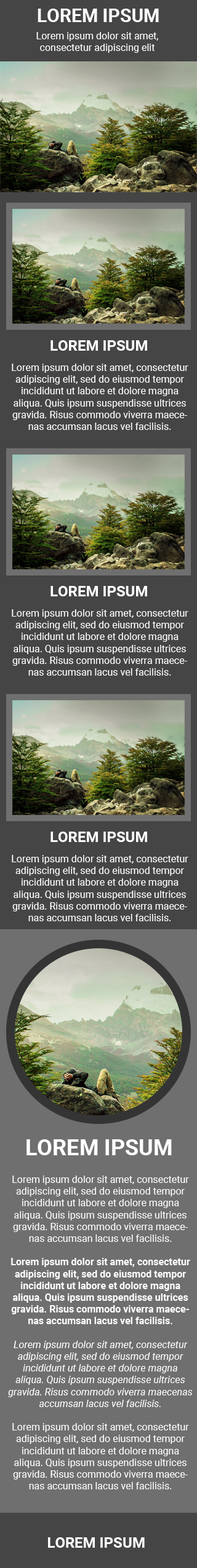
<style>
.page{position:relative;width:197px;height:1568px}
.page>*{position:absolute;margin:0}
.t1{font:18.4px "Roboto-Bold";color:#fefefe}
.t2{font:9.8px "Roboto-Regular";color:#ffffff}
.t3{font:14.7px "Roboto-Bold";color:#ffffff}
.t4{font:22.1px "Roboto-Bold";color:#ffffff}
.t5{font:9.8px "Roboto-Bold";color:#ffffff}
.t6{font:9.8px "Roboto-Italic";color:#ffffff}
</style>
<div class="page">
<p class="t1" style="left:37px;top:9px;width:121px;height:13px">LOREM IPSUM</p>
<p class="t2" style="left:36px;top:32px;width:122px;height:21px;text-align:center">Lorem ipsum dolor sit amet,<br>consectetur adipiscing elit</p>
<p class="t3" style="left:50px;top:340px;width:97px;height:11px">LOREM IPSUM</p>
<p class="t2" style="left:12px;top:364px;width:176px;height:66px;text-align:center">Lorem ipsum dolor sit amet, consectetur adipiscing elit, sed do eiusmod tempor incididunt ut labore et dolore magna aliqua. Quis ipsum suspendisse ultrices gravida. Risus commodo viverra maecenas accumsan lacus vel facilisis.</p>
<p class="t3" style="left:50px;top:586px;width:97px;height:10px">LOREM IPSUM</p>
<p class="t2" style="left:12px;top:609px;width:176px;height:67px;text-align:center">Lorem ipsum dolor sit amet, consectetur adipiscing elit, sed do eiusmod tempor incididunt ut labore et dolore magna aliqua. Quis ipsum suspendisse ultrices gravida. Risus commodo viverra maecenas accumsan lacus vel facilisis.</p>
<p class="t3" style="left:50px;top:832px;width:97px;height:10px">LOREM IPSUM</p>
<p class="t2" style="left:12px;top:855px;width:176px;height:66px;text-align:center">Lorem ipsum dolor sit amet, consectetur adipiscing elit, sed do eiusmod tempor incididunt ut labore et dolore magna aliqua. Quis ipsum suspendisse ultrices gravida. Risus commodo viverra maecenas accumsan lacus vel facilisis.</p>
<p class="t4" style="left:26px;top:1139px;width:145px;height:16px">LOREM IPSUM</p>
<p class="t2" style="left:8px;top:1176px;width:184px;height:313px;text-align:center">Lorem ipsum dolor sit amet, consectetur adipiscing elit, sed do eiusmod tempor incididunt ut labore et dolore magna aliqua. Quis ipsum suspendisse ultrices gravida. Risus commodo viverra maecenas accumsan lacus vel facilisis. <br><br><span class="t5">Lorem ipsum dolor sit amet, consectetur adipiscing elit, sed do eiusmod tempor incididunt ut labore et dolore magna aliqua. Quis ipsum suspendisse ultrices gravida. Risus commodo viverra maecenas accumsan lacus vel facilisis. <br></span><br><span class="t6">Lorem ipsum dolor sit amet, consectetur adipiscing elit, sed do eiusmod tempor incididunt ut labore et dolore magna aliqua. Quis ipsum suspendisse ultrices gravida. Risus commodo viverra maecenas accumsan lacus vel facilisis. <br></span><br>Lorem ipsum dolor sit amet, consectetur adipiscing elit, sed do eiusmod tempor incididunt ut labore et dolore magna aliqua. Quis ipsum suspendisse ultrices gravida. Risus commodo viverra maecenas accumsan lacus vel facilisis.</p>
<p class="t3" style="left:48px;top:1537px;width:96px;height:11px">LOREM IPSUM</p>
</div>
